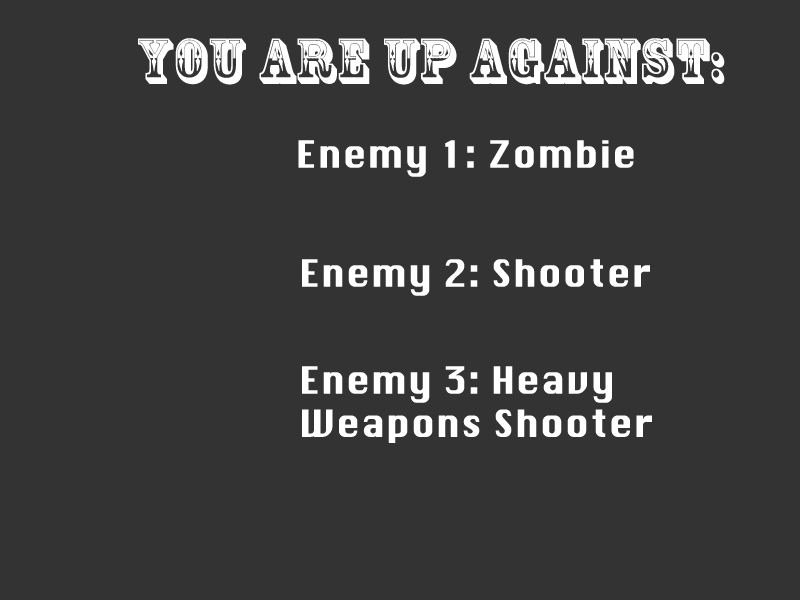
<style>
.page{position:relative;width:800px;height:600px;background:#333333}
.page>*{position:absolute;margin:0}
.t1{font:60px "RosewoodStd-Regular";color:#ffffff;font-weight:bold}
.t2{font:36px "Silom";color:#ffffff;font-weight:bold}
</style>
<div class="page">
<p class="t1" style="left:138px;top:38px;width:587px;height:47px">You Are Up AGAINST:</p>
<p class="t2" style="left:298px;top:140px;width:336px;height:37px">Enemy 1: Zombie</p>
<p class="t2" style="left:302px;top:259px;width:348px;height:37px">Enemy 2: Shooter</p>
<p class="t2" style="left:302px;top:366px;width:350px;height:77px">Enemy 3: Heavy  Weapons Shooter</p>
</div>
